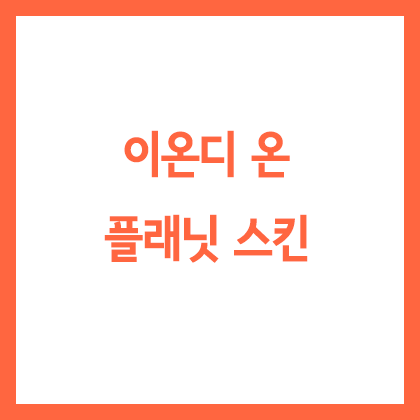
<style>
.page{position:relative;width:420px;height:420px;background:#ffffff}
.page>*{position:absolute;margin:0}
.t1{font:48px "SeN-CBL";color:#ff6640}
</style>
<div class="page">
<p class="t1" style="left:104px;top:130px;width:204px;height:133px;text-align:center">이온디 온<br>플래닛 스킨</p>
</div>
